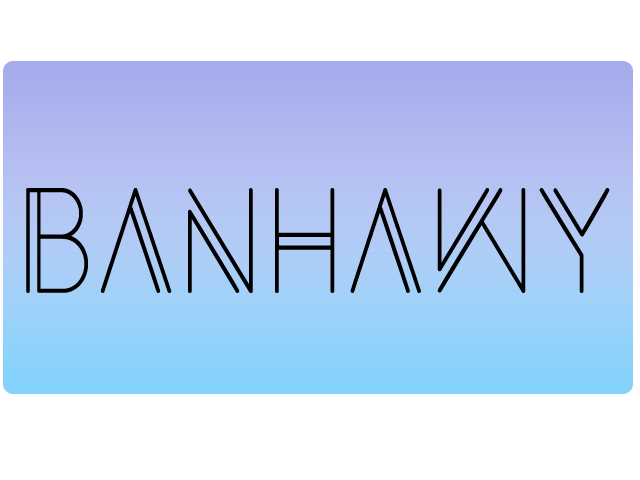
<style>
.page{position:relative;width:640px;height:480px;background:#ffffff}
.page>*{position:absolute;margin:0}
.t1{font:131px "Anders";color:#000000;scale:0.84 1}
</style>
<div class="page">
<p class="t1" style="left:26px;top:188px;width:584px;height:105px">banhawy</p>
</div>
